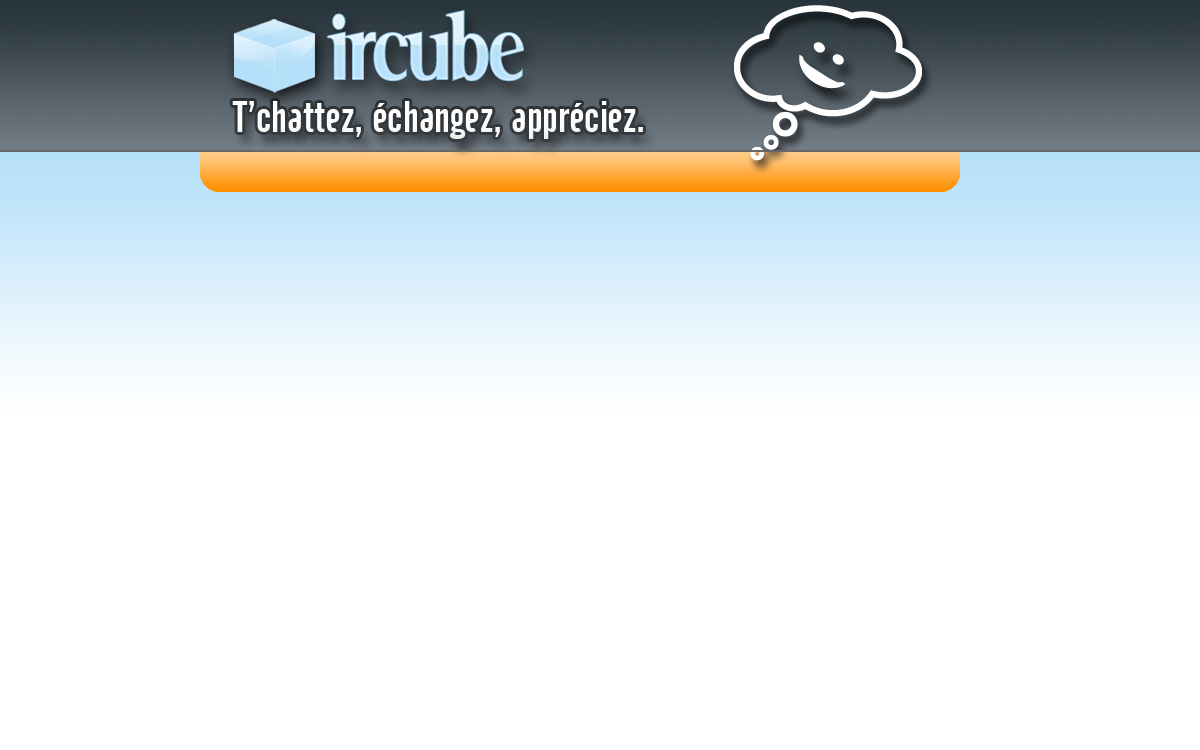
<style>
.page{position:relative;width:1200px;height:750px;background:#ffffff}
.page>*{position:absolute;margin:0}
.t1{font:106px "SerifNarrow"}
.t2{font:59px "BernardMT-Condensed";letter-spacing:0.14em;color:#fdfdfd}
.t3{font:43px "Cafeta";color:#ffffff}
</style>
<div class="page">
<p class="t1" style="left:326px;top:10px;width:198px;height:72px">ircube</p>
<p class="t2" style="left:799px;top:42px;width:46px;height:47px;rotate:123deg">:)</p>
<p class="t3" style="left:232px;top:101px;width:411px;height:38px">T’chattez, échangez, appréciez.</p>
</div>
